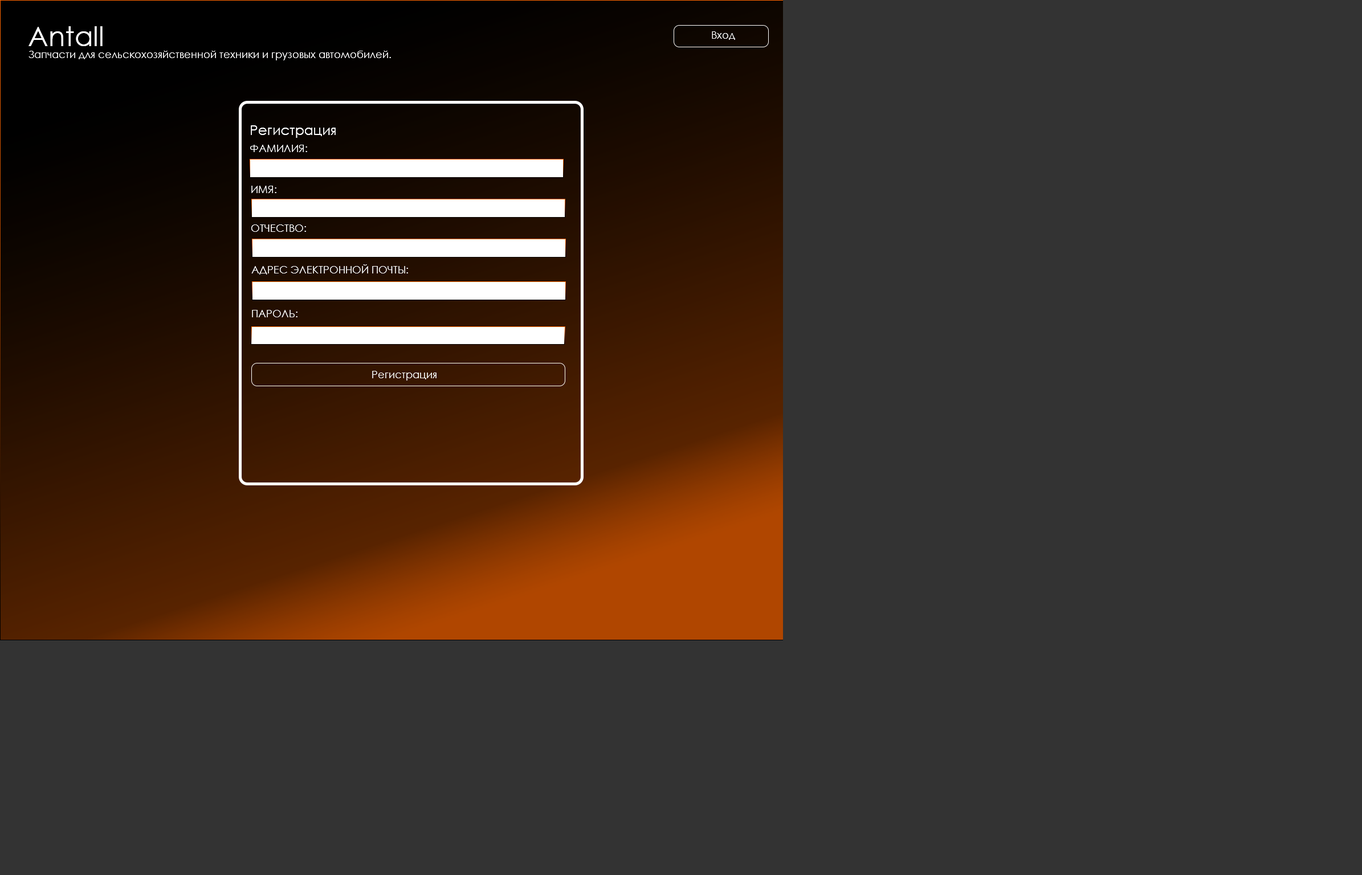
<style>
.page{position:relative;width:1362px;height:875px;background:#333333}
.page>*{position:absolute;margin:0}
.t1{font:27.4px "CenturyGothic";color:#ffffff}
.t2{font:10.3px "CenturyGothic";color:#ffffff}
.t3{font:13.6px "CenturyGothic";color:#ffffff}
</style>
<div class="page">
<p class="t1" style="left:28px;top:26px;width:75px;height:20px">Antall</p>
<p class="t2" style="left:712px;top:31px;width:23px;height:9px">Вход</p>
<p class="t2" style="left:28px;top:51px;width:363px;height:9px">Запчасти для сельскохозяйственной техники и грузовых автомобилей.</p>
<p class="t3" style="left:251px;top:125px;width:85px;height:13px">Регистрация</p>
<p class="t2" style="left:250px;top:145px;width:57px;height:7px">ФАМИЛИЯ:</p>
<p class="t2" style="left:251px;top:186px;width:25px;height:7px">ИМЯ:</p>
<p class="t2" style="left:251px;top:225px;width:55px;height:7px">ОТЧЕСТВО:</p>
<p class="t2" style="left:251px;top:264px;width:157px;height:11px">АДРЕС ЭЛЕКТРОННОЙ ПОЧТЫ:</p>
<p class="t2" style="left:252px;top:310px;width:46px;height:7px">ПАРОЛЬ:</p>
<p class="t2" style="left:372px;top:371px;width:65px;height:10px">Регистрация</p>
</div>
